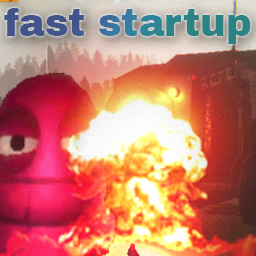
<style>
.page{position:relative;width:256px;height:256px}
.page>*{position:absolute;margin:0}
.t1{font:38.5px "ArchivoBlack-Regular"}
</style>
<div class="page">
<p class="t1" style="left:4px;top:8px;width:247px;height:36px">fast startup</p>
</div>
